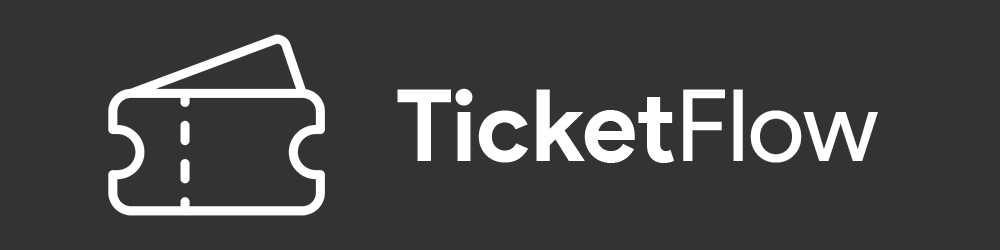
<style>
.page{position:relative;width:1000px;height:250px;background:#333333}
.page>*{position:absolute;margin:0}
.t1{font:100px "ProductSans-Bold";color:#ffffff}
.t2{font:100px "ProductSans-Regular";color:#ffffff}
</style>
<div class="page">
<p class="t1" style="left:397px;top:88px;width:481px;height:75px">Ticket<span class="t2">Flow</span></p>
</div>
